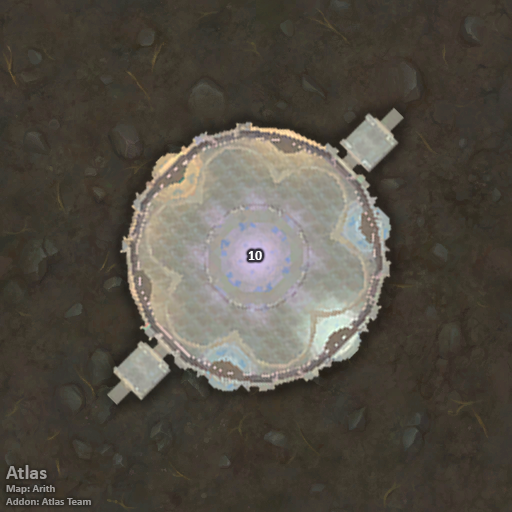
<style>
.page{position:relative;width:512px;height:512px}
.page>*{position:absolute;margin:0}
.t1{font:14px "Calibri-Bold";color:#ffffff}
.t2{font:11px "Calibri-Bold";color:#9d9b98}
.t3{font:20px "Calibri-Bold";color:#9d9b98}
</style>
<div class="page">
<p class="t1" style="left:248px;top:251px;width:14px;height:9px">10</p>
<p class="t2" style="left:6px;top:465px;width:85px;height:40px"><span class="t3">Atlas<br></span>Map: Arith<br>Addon: Atlas Team</p>
</div>
